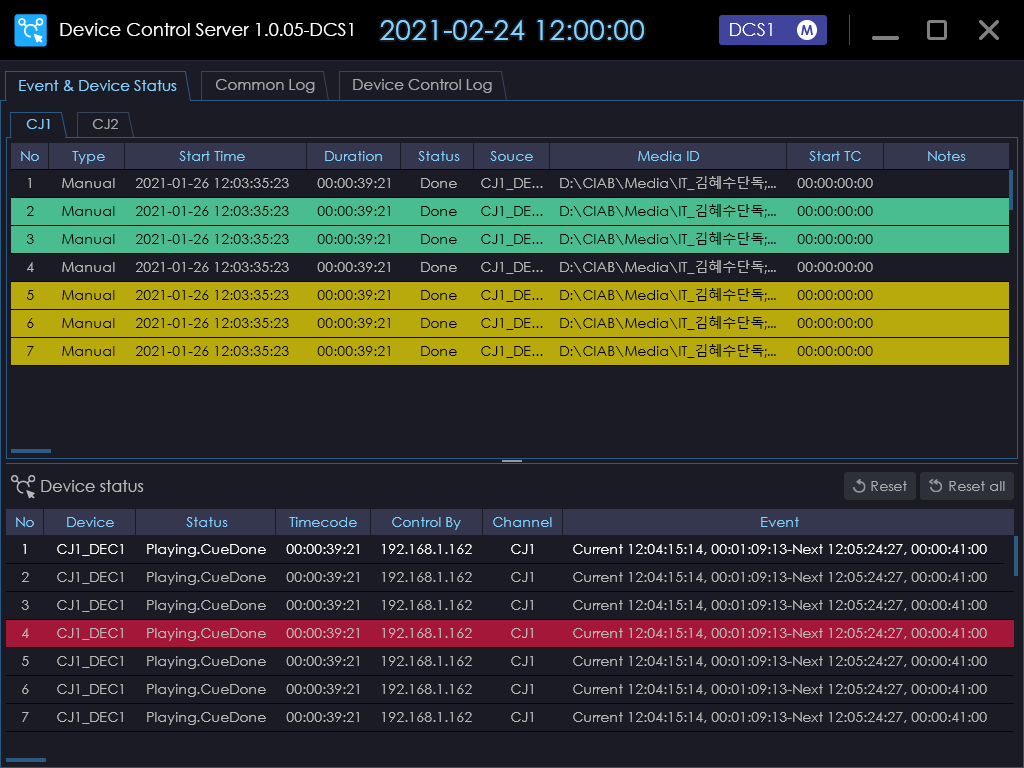
<style>
.page{position:relative;width:1024px;height:768px;background:#1b1b26}
.page>*{position:absolute;margin:0}
.t1{font:18px "CenturyGothic";color:#ffffff}
.t2{font:28px "CenturyGothic";color:#83d1ff}
.t3{font:15px "CenturyGothic";color:#83d1ff}
.t4{font:15px "CenturyGothic";color:#a8a8aa}
.t5{font:14px "CenturyGothic";color:#83d1ff}
.t6{font:14px "CenturyGothic";color:#a7a7aa}
.t7{font:14px "CenturyGothic";color:#b8b8b8}
.t8{font:14px "MalgunGothic";color:#b8b8b8}
.t9{font:14px "CenturyGothic";color:#000000}
.t10{font:14px "MalgunGothic";color:#000000}
.t11{font:16px "CenturyGothic";color:#b8b8b8}
.t12{font:14px "CenturyGothic";color:#acacaf}
.t13{font:14px "CenturyGothic";color:#ffffff}
</style>
<div class="page">
<p class="t1" style="left:60px;top:23px;width:293px;height:13px">Device Control Server 1.0.05-DCS1</p>
<p class="t2" style="left:380px;top:20px;width:264px;height:20px">2021-02-24 12:00:00</p>
<p class="t1" style="left:730px;top:23px;width:42px;height:13px">DCS1</p>
<p class="t3" style="left:19px;top:80px;width:158px;height:11px">Event &amp; Device Status</p>
<p class="t4" style="left:216px;top:79px;width:99px;height:14px">Common Log</p>
<p class="t4" style="left:353px;top:79px;width:139px;height:14px">Device Control Log</p>
<p class="t5" style="left:26px;top:119px;width:24px;height:10px">CJ1</p>
<p class="t6" style="left:92px;top:119px;width:26px;height:10px">CJ2</p>
<p class="t5" style="left:21px;top:151px;width:18px;height:10px">No</p>
<p class="t5" style="left:72px;top:151px;width:33px;height:13px">Type</p>
<p class="t5" style="left:179px;top:151px;width:66px;height:10px">Start Time</p>
<p class="t5" style="left:325px;top:151px;width:57px;height:10px">Duration</p>
<p class="t5" style="left:418px;top:151px;width:42px;height:10px">Status</p>
<p class="t5" style="left:490px;top:151px;width:43px;height:10px">Souce</p>
<p class="t5" style="left:638px;top:151px;width:61px;height:10px">Media ID</p>
<p class="t5" style="left:809px;top:151px;width:52px;height:10px">Start TC</p>
<p class="t5" style="left:928px;top:151px;width:38px;height:10px">Notes</p>
<p class="t7" style="left:28px;top:178px;width:3px;height:10px">1</p>
<p class="t7" style="left:62px;top:178px;width:53px;height:10px">Manual</p>
<p class="t7" style="left:136px;top:178px;width:153px;height:10px">2021-01-26 12:03:35:23</p>
<p class="t7" style="left:317px;top:178px;width:73px;height:10px">00:00:39:21</p>
<p class="t7" style="left:421px;top:178px;width:36px;height:10px">Done</p>
<p class="t7" style="left:481px;top:178px;width:62px;height:12px">CJ1_DE...</p>
<p class="t7" style="left:560px;top:176px;width:216px;height:14px">D:\CIAB\Media\IT_<span class="t8">김혜수단독;...</span></p>
<p class="t7" style="left:797px;top:178px;width:76px;height:10px">00:00:00:00</p>
<p class="t9" style="left:27px;top:206px;width:7px;height:10px">2</p>
<p class="t9" style="left:62px;top:206px;width:53px;height:10px">Manual</p>
<p class="t9" style="left:136px;top:206px;width:153px;height:10px">2021-01-26 12:03:35:23</p>
<p class="t9" style="left:317px;top:206px;width:73px;height:10px">00:00:39:21</p>
<p class="t9" style="left:421px;top:206px;width:36px;height:10px">Done</p>
<p class="t9" style="left:481px;top:206px;width:62px;height:12px">CJ1_DE...</p>
<p class="t9" style="left:560px;top:204px;width:216px;height:14px">D:\CIAB\Media\IT_<span class="t10">김혜수단독;...</span></p>
<p class="t9" style="left:797px;top:206px;width:76px;height:10px">00:00:00:00</p>
<p class="t9" style="left:560px;top:232px;width:216px;height:14px">D:\CIAB\Media\IT_<span class="t10">김혜수단독;...</span></p>
<p class="t9" style="left:26px;top:234px;width:8px;height:10px">3</p>
<p class="t9" style="left:62px;top:234px;width:53px;height:10px">Manual</p>
<p class="t9" style="left:136px;top:234px;width:153px;height:10px">2021-01-26 12:03:35:23</p>
<p class="t9" style="left:317px;top:234px;width:73px;height:10px">00:00:39:21</p>
<p class="t9" style="left:421px;top:234px;width:36px;height:10px">Done</p>
<p class="t9" style="left:481px;top:234px;width:62px;height:12px">CJ1_DE...</p>
<p class="t9" style="left:797px;top:234px;width:76px;height:10px">00:00:00:00</p>
<p class="t7" style="left:27px;top:262px;width:7px;height:10px">4</p>
<p class="t7" style="left:62px;top:262px;width:53px;height:10px">Manual</p>
<p class="t7" style="left:136px;top:262px;width:153px;height:10px">2021-01-26 12:03:35:23</p>
<p class="t7" style="left:317px;top:262px;width:73px;height:10px">00:00:39:21</p>
<p class="t7" style="left:421px;top:262px;width:36px;height:10px">Done</p>
<p class="t7" style="left:481px;top:262px;width:62px;height:12px">CJ1_DE...</p>
<p class="t7" style="left:560px;top:260px;width:216px;height:14px">D:\CIAB\Media\IT_<span class="t8">김혜수단독;...</span></p>
<p class="t7" style="left:797px;top:262px;width:76px;height:10px">00:00:00:00</p>
<p class="t9" style="left:27px;top:290px;width:7px;height:10px">5</p>
<p class="t9" style="left:62px;top:290px;width:53px;height:10px">Manual</p>
<p class="t9" style="left:136px;top:290px;width:153px;height:10px">2021-01-26 12:03:35:23</p>
<p class="t9" style="left:317px;top:290px;width:73px;height:10px">00:00:39:21</p>
<p class="t9" style="left:421px;top:290px;width:36px;height:10px">Done</p>
<p class="t9" style="left:481px;top:290px;width:62px;height:12px">CJ1_DE...</p>
<p class="t9" style="left:560px;top:288px;width:216px;height:14px">D:\CIAB\Media\IT_<span class="t10">김혜수단독;...</span></p>
<p class="t9" style="left:797px;top:290px;width:76px;height:10px">00:00:00:00</p>
<p class="t9" style="left:27px;top:318px;width:7px;height:10px">6</p>
<p class="t9" style="left:62px;top:318px;width:53px;height:10px">Manual</p>
<p class="t9" style="left:136px;top:318px;width:153px;height:10px">2021-01-26 12:03:35:23</p>
<p class="t9" style="left:317px;top:318px;width:73px;height:10px">00:00:39:21</p>
<p class="t9" style="left:421px;top:318px;width:36px;height:10px">Done</p>
<p class="t9" style="left:481px;top:318px;width:62px;height:12px">CJ1_DE...</p>
<p class="t9" style="left:560px;top:316px;width:216px;height:14px">D:\CIAB\Media\IT_<span class="t10">김혜수단독;...</span></p>
<p class="t9" style="left:797px;top:318px;width:76px;height:10px">00:00:00:00</p>
<p class="t9" style="left:27px;top:346px;width:7px;height:10px">7</p>
<p class="t9" style="left:62px;top:346px;width:53px;height:10px">Manual</p>
<p class="t9" style="left:136px;top:346px;width:153px;height:10px">2021-01-26 12:03:35:23</p>
<p class="t9" style="left:317px;top:346px;width:73px;height:10px">00:00:39:21</p>
<p class="t9" style="left:421px;top:346px;width:36px;height:10px">Done</p>
<p class="t9" style="left:481px;top:346px;width:62px;height:12px">CJ1_DE...</p>
<p class="t9" style="left:560px;top:344px;width:216px;height:14px">D:\CIAB\Media\IT_<span class="t10">김혜수단독;...</span></p>
<p class="t9" style="left:797px;top:346px;width:76px;height:10px">00:00:00:00</p>
<p class="t11" style="left:41px;top:480px;width:103px;height:12px">Device status</p>
<p class="t12" style="left:871px;top:481px;width:36px;height:10px">Reset</p>
<p class="t12" style="left:949px;top:481px;width:56px;height:10px">Reset all</p>
<p class="t5" style="left:16px;top:517px;width:18px;height:10px">No</p>
<p class="t5" style="left:67px;top:517px;width:47px;height:10px">Device</p>
<p class="t5" style="left:186px;top:517px;width:42px;height:10px">Status</p>
<p class="t5" style="left:289px;top:517px;width:68px;height:10px">Timecode</p>
<p class="t5" style="left:392px;top:517px;width:69px;height:13px">Control By</p>
<p class="t5" style="left:493px;top:517px;width:59px;height:10px">Channel</p>
<p class="t5" style="left:761px;top:517px;width:38px;height:10px">Event</p>
<p class="t13" style="left:23px;top:544px;width:3px;height:10px">1</p>
<p class="t13" style="left:57px;top:544px;width:66px;height:12px">CJ1_DEC1</p>
<p class="t13" style="left:147px;top:544px;width:119px;height:13px">Playing.CueDone</p>
<p class="t13" style="left:286px;top:544px;width:73px;height:10px">00:00:39:21</p>
<p class="t13" style="left:382px;top:544px;width:90px;height:10px">192.168.1.162</p>
<p class="t13" style="left:511px;top:544px;width:22px;height:10px">CJ1</p>
<p class="t13" style="left:573px;top:544px;width:414px;height:11px">Current 12:04:15:14, 00:01:09:13-Next 12:05:24:27, 00:00:41:00</p>
<p class="t7" style="left:22px;top:572px;width:7px;height:10px">2</p>
<p class="t7" style="left:57px;top:572px;width:66px;height:12px">CJ1_DEC1</p>
<p class="t7" style="left:147px;top:572px;width:119px;height:13px">Playing.CueDone</p>
<p class="t7" style="left:286px;top:572px;width:73px;height:10px">00:00:39:21</p>
<p class="t7" style="left:382px;top:572px;width:90px;height:10px">192.168.1.162</p>
<p class="t7" style="left:511px;top:572px;width:22px;height:10px">CJ1</p>
<p class="t7" style="left:573px;top:572px;width:414px;height:11px">Current 12:04:15:14, 00:01:09:13-Next 12:05:24:27, 00:00:41:00</p>
<p class="t7" style="left:21px;top:600px;width:8px;height:10px">3</p>
<p class="t7" style="left:57px;top:600px;width:66px;height:12px">CJ1_DEC1</p>
<p class="t7" style="left:147px;top:600px;width:119px;height:13px">Playing.CueDone</p>
<p class="t7" style="left:286px;top:600px;width:73px;height:10px">00:00:39:21</p>
<p class="t7" style="left:382px;top:600px;width:90px;height:10px">192.168.1.162</p>
<p class="t7" style="left:511px;top:600px;width:22px;height:10px">CJ1</p>
<p class="t7" style="left:573px;top:600px;width:414px;height:11px">Current 12:04:15:14, 00:01:09:13-Next 12:05:24:27, 00:00:41:00</p>
<p class="t7" style="left:22px;top:628px;width:7px;height:10px">4</p>
<p class="t7" style="left:57px;top:628px;width:66px;height:12px">CJ1_DEC1</p>
<p class="t7" style="left:147px;top:628px;width:119px;height:13px">Playing.CueDone</p>
<p class="t7" style="left:286px;top:628px;width:73px;height:10px">00:00:39:21</p>
<p class="t7" style="left:382px;top:628px;width:90px;height:10px">192.168.1.162</p>
<p class="t7" style="left:511px;top:628px;width:22px;height:10px">CJ1</p>
<p class="t7" style="left:573px;top:628px;width:414px;height:11px">Current 12:04:15:14, 00:01:09:13-Next 12:05:24:27, 00:00:41:00</p>
<p class="t7" style="left:22px;top:656px;width:7px;height:10px">5</p>
<p class="t7" style="left:57px;top:656px;width:66px;height:12px">CJ1_DEC1</p>
<p class="t7" style="left:147px;top:656px;width:119px;height:13px">Playing.CueDone</p>
<p class="t7" style="left:286px;top:656px;width:73px;height:10px">00:00:39:21</p>
<p class="t7" style="left:382px;top:656px;width:90px;height:10px">192.168.1.162</p>
<p class="t7" style="left:511px;top:656px;width:22px;height:10px">CJ1</p>
<p class="t7" style="left:573px;top:656px;width:414px;height:11px">Current 12:04:15:14, 00:01:09:13-Next 12:05:24:27, 00:00:41:00</p>
<p class="t7" style="left:22px;top:684px;width:7px;height:10px">6</p>
<p class="t7" style="left:57px;top:684px;width:66px;height:12px">CJ1_DEC1</p>
<p class="t7" style="left:147px;top:684px;width:119px;height:13px">Playing.CueDone</p>
<p class="t7" style="left:286px;top:684px;width:73px;height:10px">00:00:39:21</p>
<p class="t7" style="left:382px;top:684px;width:90px;height:10px">192.168.1.162</p>
<p class="t7" style="left:511px;top:684px;width:22px;height:10px">CJ1</p>
<p class="t7" style="left:573px;top:684px;width:414px;height:11px">Current 12:04:15:14, 00:01:09:13-Next 12:05:24:27, 00:00:41:00</p>
<p class="t7" style="left:22px;top:712px;width:7px;height:10px">7</p>
<p class="t7" style="left:57px;top:712px;width:66px;height:12px">CJ1_DEC1</p>
<p class="t7" style="left:147px;top:712px;width:119px;height:13px">Playing.CueDone</p>
<p class="t7" style="left:286px;top:712px;width:73px;height:10px">00:00:39:21</p>
<p class="t7" style="left:382px;top:712px;width:90px;height:10px">192.168.1.162</p>
<p class="t7" style="left:511px;top:712px;width:22px;height:10px">CJ1</p>
<p class="t7" style="left:573px;top:712px;width:414px;height:11px">Current 12:04:15:14, 00:01:09:13-Next 12:05:24:27, 00:00:41:00</p>
</div>
